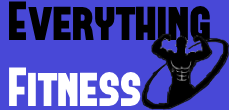
<style>
.page{position:relative;width:229px;height:110px;background:#4848d7}
.page>*{position:absolute;margin:0}
.t1{font:55px "FORQUE";color:#000000}
.t2{font:55px "FORQUE";color:#ffffff}
</style>
<div class="page">
<p class="t1" style="left:9px;top:1px;width:201px;height:106px">Everything<br><span class="t2">Fitness</span></p>
</div>
